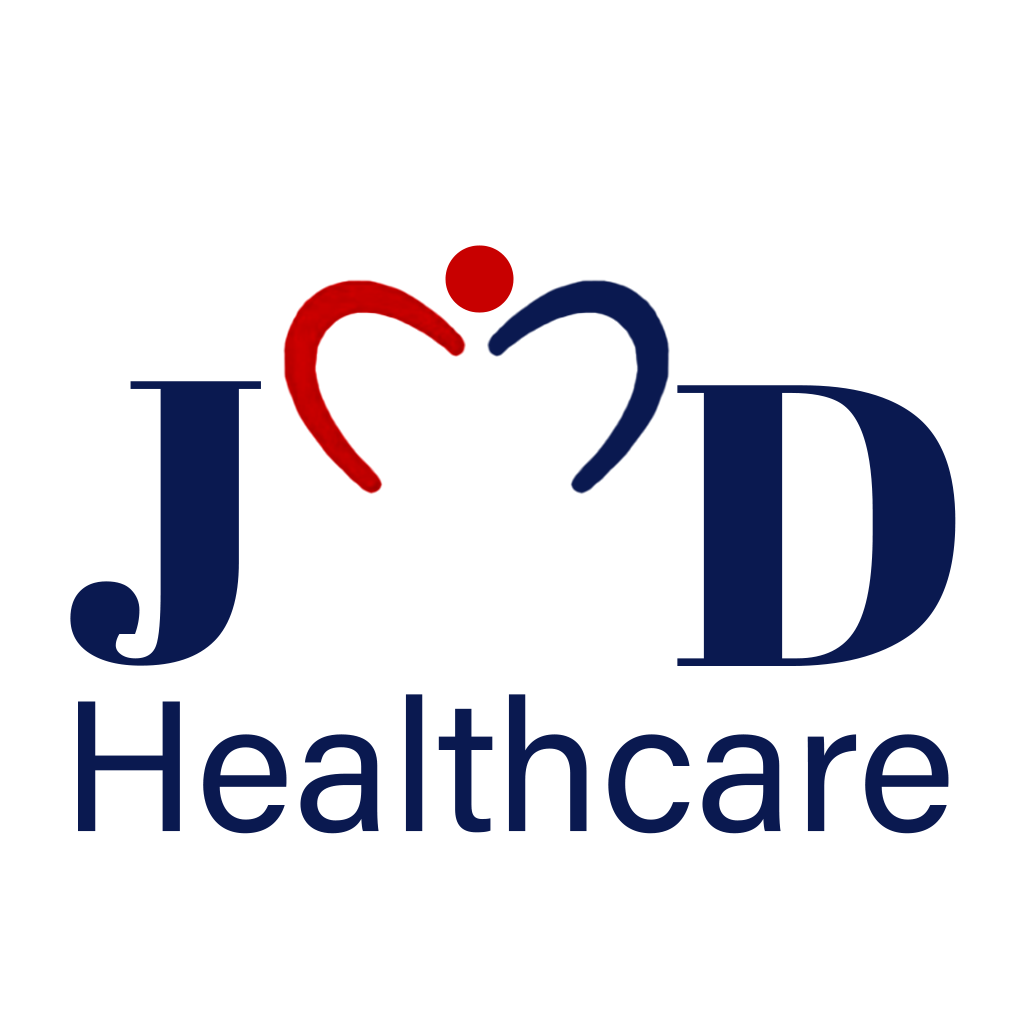
<style>
.page{position:relative;width:1024px;height:1024px;background:#ffffff}
.page>*{position:absolute;margin:0}
.t1{font:401.3px "AbrilFatface-Regular";color:#0a1950}
.t2{font:186.1px "AcuminConcept-Regular";color:#0a1950}
</style>
<div class="page">
<p class="t1" style="left:70px;top:381px;width:191px;height:285px">J</p>
<p class="t1" style="left:677px;top:385px;width:279px;height:281px">D</p>
<p class="t2" style="left:78px;top:694px;width:871px;height:140px">Healthcare</p>
</div>
